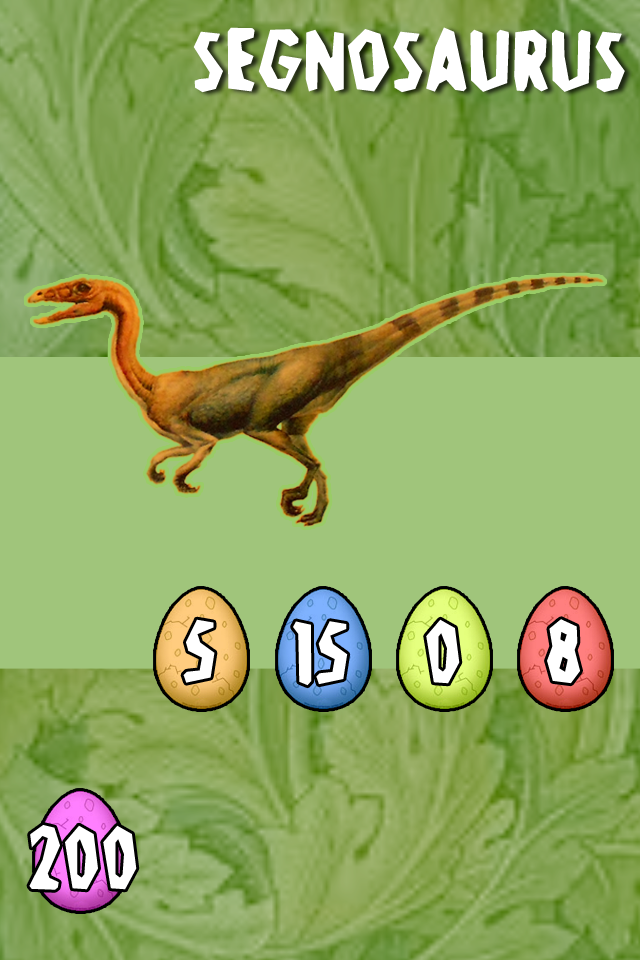
<style>
.page{position:relative;width:640px;height:960px;background:#a0c57b}
.page>*{position:absolute;margin:0}
.t1{font:96px "Stone-Age";color:#ffffff}
</style>
<div class="page">
<p class="t1" style="left:193px;top:27px;width:432px;height:66px">Segnosaurus</p>
<p class="t1" style="left:183px;top:619px;width:32px;height:64px">5</p>
<p class="t1" style="left:293px;top:621px;width:55px;height:65px">15</p>
<p class="t1" style="left:426px;top:619px;width:34px;height:65px">0</p>
<p class="t1" style="left:547px;top:619px;width:33px;height:65px">8</p>
<p class="t1" style="left:29px;top:825px;width:108px;height:65px">200</p>
</div>
